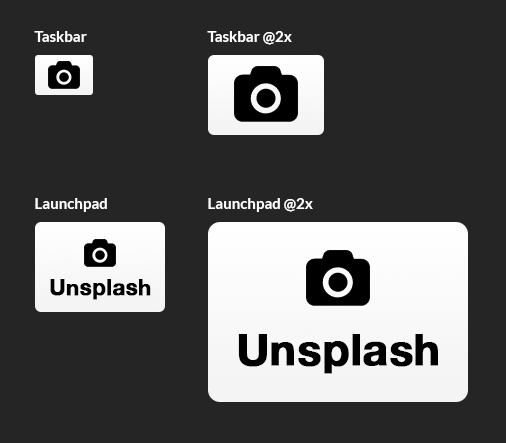
<style>
.page{position:relative;width:506px;height:443px;background:#252525}
.page>*{position:absolute;margin:0}
.t1{font:15px "Lato-Bold";color:#ffffff}
.t2{font:22px "HelveticaNeue-Bold";color:#000000;font-weight:bold}
.t3{font:44px "HelveticaNeue-Bold";color:#000000;font-weight:bold}
</style>
<div class="page">
<p class="t1" style="left:34px;top:31px;width:53px;height:11px">Taskbar</p>
<p class="t1" style="left:207px;top:31px;width:85px;height:14px">Taskbar @2x</p>
<p class="t1" style="left:35px;top:198px;width:72px;height:14px">Launchpad</p>
<p class="t1" style="left:208px;top:198px;width:105px;height:14px">Launchpad @2x</p>
<p class="t2" style="left:50px;top:279px;width:101px;height:21px">Unsplash</p>
<p class="t3" style="left:238px;top:334px;width:200px;height:40px">Unsplash</p>
</div>
